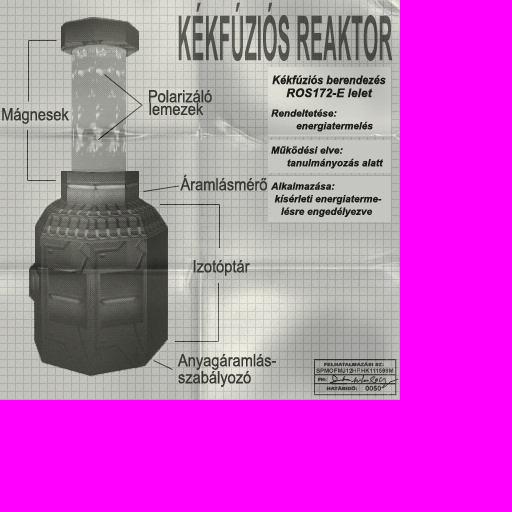
<style>
.page{position:relative;width:512px;height:512px;background:#ff00ff}
.page>*{position:absolute;margin:0}
.t1{font:62px "Arial-BoldMT";color:#4e4e4a;scale:0.32 1}
.t2{font:12px "Arial-BoldItalicMT";color:#24241f;scale:0.9 1}
.t3{font:12px "Arial-BoldItalicMT";color:#24241f}
.t4{font:17px/12.6px "ArialNarrow";color:#393934;scale:1.05 1}
.t5{font:17px "ArialNarrow";color:#393934;scale:1.05 1}
.t6{font:10px/12.6px "Arial-BoldItalicMT";color:#24241f}
.t7{font:17px/17px "ArialNarrow";color:#393934;scale:1.05 1}
.t8{font:4.1px "Arial-BoldMT";color:#393934;font-weight:bold;scale:1.3 1}
</style>
<div class="page">
<p class="t1" style="left:178px;top:2px;width:215px;height:59px">KÉKFÚZIÓS REAKTOR</p>
<p class="t2" style="left:272px;top:75px;width:114px;height:10px">Kékfúziós berendezés</p>
<p class="t3" style="left:286px;top:88px;width:87px;height:10px">ROS172-E lelet</p>
<p class="t4" style="left:149px;top:90px;width:63px;height:26px;text-align:center">Polarizáló<br>lemezek</p>
<p class="t5" style="left:2px;top:108px;width:67px;height:16px">Mágnesek</p>
<p class="t6" style="left:271px;top:109px;width:102px;height:23px;text-align:center">Rendeltetése:<br>                      energiatermelés</p>
<p class="t6" style="left:271px;top:146px;width:112px;height:23px;text-align:center">Működési elve:<br>                    tanulmányozás alatt</p>
<p class="t5" style="left:180px;top:174px;width:87px;height:17px">Áramlásmérő</p>
<p class="t6" style="left:271px;top:182px;width:111px;height:35px;text-align:center">Alkalmazása:<br>                  kísérleti energiaterme-<br>                 lésre engedélyezve</p>
<p class="t5" style="left:193px;top:260px;width:57px;height:16px">Izotóptár</p>
<p class="t7" style="left:177px;top:354px;width:99px;height:33px">Anyagáramlás-<br>szabályozó</p>
<p class="t8" style="left:324px;top:362px;width:60px;height:5px">FELHATALMAZÁSI SZ:</p>
<p class="t8" style="left:318px;top:377px;width:9px;height:5px">FH:</p>
<p class="t8" style="left:326px;top:386px;width:32px;height:5px">HATÁRIDŐ:</p>
</div>
